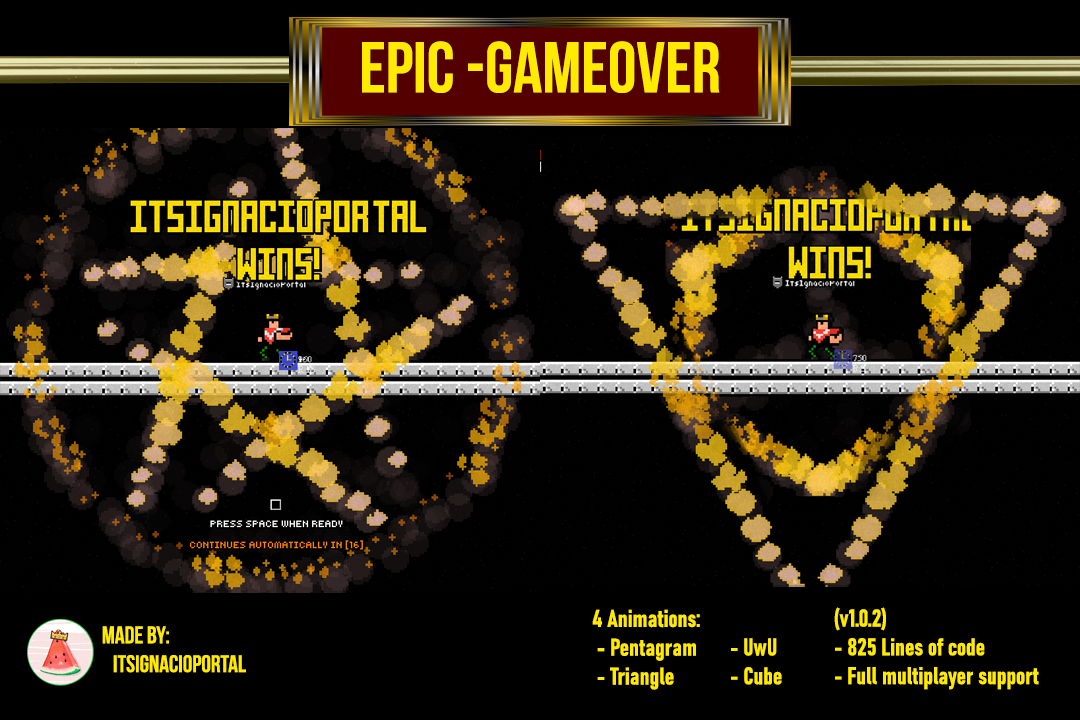
<style>
.page{position:relative;width:1080px;height:720px;background:#000000}
.page>*{position:absolute;margin:0}
.t1{font:72px "BebasNeue";color:#ffea00}
.t2{font:24px "Bahnschrift-BoldCondensed";color:#ffea00}
.t3{font:24px "BebasNeue";color:#ffea00}
</style>
<div class="page">
<p class="t1" style="left:362px;top:41px;width:358px;height:52px">EPIC -GAMEOVER</p>
<p class="t2" style="left:592px;top:609px;width:108px;height:81px">4 Animations:<br> - Pentagram<br> - Triangle</p>
<p class="t2" style="left:834px;top:607px;width:205px;height:83px">(v1.0.2) <br>- 825 Lines of code<br>- Full multiplayer support</p>
<p class="t3" style="left:102px;top:626px;width:144px;height:47px">Made by: <br>   ItsIgnacioPortal</p>
<p class="t2" style="left:731px;top:638px;width:51px;height:47px">- UwU<br>- Cube</p>
</div>
